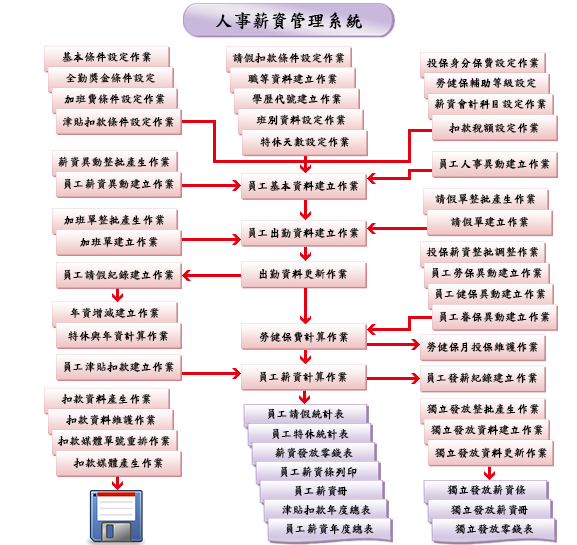
<style>
.page{position:relative;width:577px;height:545px;background:#ffffff}
.page>*{position:absolute;margin:0}
.t1{font:18px "DFKaiShu-SB-Estd-BF";color:#000000;font-weight:bold}
.t2{font:11px "DFKaiShu-SB-Estd-BF";color:#000000;font-weight:bold}
</style>
<div class="page">
<p class="t1" style="left:216px;top:12px;width:147px;height:18px">人事薪資管理系統</p>
<p class="t2" style="left:62px;top:51px;width:89px;height:12px">基本條件設定作業</p>
<p class="t2" style="left:232px;top:52px;width:113px;height:12px">請假扣款條件設定作業</p>
<p class="t2" style="left:426px;top:57px;width:113px;height:12px">投保身分保費設定作業</p>
<p class="t2" style="left:66px;top:72px;width:90px;height:11px">全勤獎金條件設定</p>
<p class="t2" style="left:248px;top:73px;width:89px;height:12px">職等資料建立作業</p>
<p class="t2" style="left:436px;top:77px;width:101px;height:12px">勞健保輔助等級設定</p>
<p class="t2" style="left:64px;top:93px;width:101px;height:12px">加班費條件設定作業</p>
<p class="t2" style="left:252px;top:93px;width:89px;height:12px">學歷代號建立作業</p>
<p class="t2" style="left:434px;top:98px;width:112px;height:12px">薪資會計科目設定作業</p>
<p class="t2" style="left:62px;top:116px;width:112px;height:12px">津貼扣款條件設定作業</p>
<p class="t2" style="left:256px;top:114px;width:90px;height:12px">班別資料設定作業</p>
<p class="t2" style="left:449px;top:122px;width:90px;height:11px">扣款稅額設定作業</p>
<p class="t2" style="left:260px;top:136px;width:89px;height:12px">特休天數設定作業</p>
<p class="t2" style="left:58px;top:156px;width:112px;height:12px">薪資異動整批產生作業</p>
<p class="t2" style="left:439px;top:158px;width:111px;height:12px">員工人事異動建立作業</p>
<p class="t2" style="left:64px;top:178px;width:110px;height:12px">員工薪資異動建立作業</p>
<p class="t2" style="left:248px;top:180px;width:111px;height:12px">員工基本資料建立作業</p>
<p class="t2" style="left:435px;top:193px;width:101px;height:12px">請假單整批產生作業</p>
<p class="t2" style="left:64px;top:214px;width:101px;height:12px">加班單整批產生作業</p>
<p class="t2" style="left:450px;top:216px;width:79px;height:12px">請假單建立作業</p>
<p class="t2" style="left:248px;top:227px;width:111px;height:12px">員工出勤資料建立作業</p>
<p class="t2" style="left:80px;top:236px;width:78px;height:12px">加班單建立作業</p>
<p class="t2" style="left:426px;top:246px;width:113px;height:12px">投保薪資整批調整作業</p>
<p class="t2" style="left:63px;top:269px;width:111px;height:12px">員工請假紀錄建立作業</p>
<p class="t2" style="left:259px;top:268px;width:88px;height:12px">出勤資料更新作業</p>
<p class="t2" style="left:431px;top:267px;width:111px;height:12px">員工勞保異動建立作業</p>
<p class="t2" style="left:435px;top:288px;width:111px;height:12px">員工健保異動建立作業</p>
<p class="t2" style="left:70px;top:307px;width:89px;height:12px">年資增減建立作業</p>
<p class="t2" style="left:439px;top:311px;width:111px;height:11px">員工眷保異動建立作業</p>
<p class="t2" style="left:68px;top:330px;width:100px;height:12px">特休與年資計算作業</p>
<p class="t2" style="left:259px;top:331px;width:89px;height:12px">勞健保費計算作業</p>
<p class="t2" style="left:427px;top:341px;width:111px;height:12px">勞健保月投保維護作業</p>
<p class="t2" style="left:63px;top:361px;width:111px;height:12px">員工津貼扣款建立作業</p>
<p class="t2" style="left:259px;top:371px;width:88px;height:12px">員工薪資計算作業</p>
<p class="t2" style="left:427px;top:372px;width:110px;height:12px">員工發薪紀錄建立作業</p>
<p class="t2" style="left:61px;top:393px;width:90px;height:12px">扣款資料產生作業</p>
<p class="t2" style="left:66px;top:414px;width:90px;height:12px">扣款資料維護作業</p>
<p class="t2" style="left:267px;top:408px;width:77px;height:12px">員工請假統計表</p>
<p class="t2" style="left:426px;top:403px;width:113px;height:12px">獨立發放整批產生作業</p>
<p class="t2" style="left:430px;top:424px;width:113px;height:12px">獨立發放資料建立作業</p>
<p class="t2" style="left:57px;top:435px;width:113px;height:12px">扣款媒體單號重排作業</p>
<p class="t2" style="left:272px;top:428px;width:77px;height:12px">員工特休統計表</p>
<p class="t2" style="left:275px;top:447px;width:78px;height:12px">薪資發放零錢表</p>
<p class="t2" style="left:434px;top:447px;width:113px;height:12px">獨立發放資料更新作業</p>
<p class="t2" style="left:73px;top:457px;width:90px;height:12px">扣款媒體產生作業</p>
<p class="t2" style="left:280px;top:466px;width:77px;height:12px">員工薪資條列印</p>
<p class="t2" style="left:294px;top:485px;width:53px;height:12px">員工薪資冊</p>
<p class="t2" style="left:447px;top:484px;width:79px;height:12px">獨立發放薪資條</p>
<p class="t2" style="left:282px;top:504px;width:89px;height:12px">津貼扣款年度總表</p>
<p class="t2" style="left:450px;top:504px;width:78px;height:11px">獨立發放薪資冊</p>
<p class="t2" style="left:286px;top:523px;width:88px;height:12px">員工薪資年度總表</p>
<p class="t2" style="left:455px;top:523px;width:79px;height:12px">獨立發放零錢表</p>
</div>
